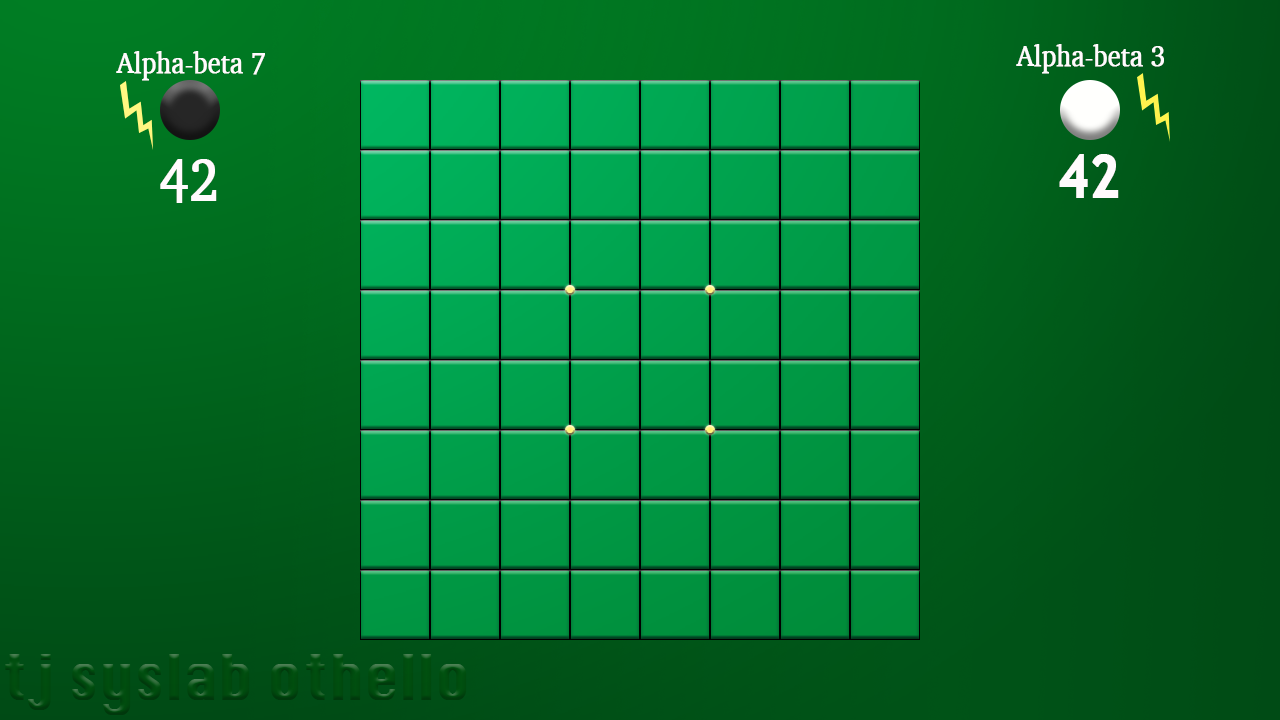
<style>
.page{position:relative;width:1280px;height:720px}
.page>*{position:absolute;margin:0}
.t1{font:30px "Charter-Roman";letter-spacing:-0.005em;color:#fffbfd;font-weight:bold;scale:0.85 1}
.t2{font:60px "Charter-Roman";letter-spacing:-0.005em;color:#fffbfd;font-weight:bold;scale:0.85 1}
.t3{font:60px "TrebuchetMS-Bold";letter-spacing:-0.005em;color:#fffbfd;font-weight:bold;scale:0.85 1}
</style>
<div class="page">
<p class="t1" style="left:116px;top:51px;width:149px;height:30px">Alpha-beta 7</p>
<p class="t1" style="left:1016px;top:44px;width:148px;height:30px">Alpha-beta 3</p>
<p class="t2" style="left:160px;top:159px;width:57px;height:44px">42</p>
<p class="t3" style="left:1059px;top:154px;width:60px;height:44px">42</p>
</div>
